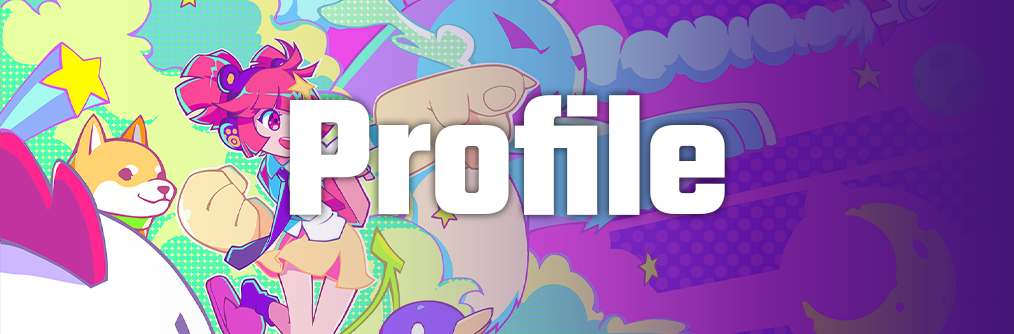
<style>
.page{position:relative;width:1014px;height:334px}
.page>*{position:absolute;margin:0}
.t1{font:169.7px "Teko-Bold";color:#ffffff}
</style>
<div class="page">
<p class="t1" style="left:289px;top:95px;width:436px;height:120px">Profile</p>
</div>
